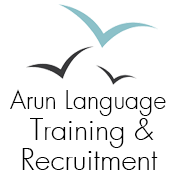
<style>
.page{position:relative;width:180px;height:180px;background:#ffffff}
.page>*{position:absolute;margin:0}
.t1{font:25px "FuturaLight";color:#000000}
.t2{font:29.2px "FuturaLight";color:#000000}
</style>
<div class="page">
<p class="t1" style="left:10px;top:89px;width:156px;height:27px">Arun Language</p>
<p class="t2" style="left:30px;top:118px;width:124px;height:30px">Training &amp;</p>
<p class="t2" style="left:22px;top:148px;width:136px;height:22px">Recruitment</p>
</div>
